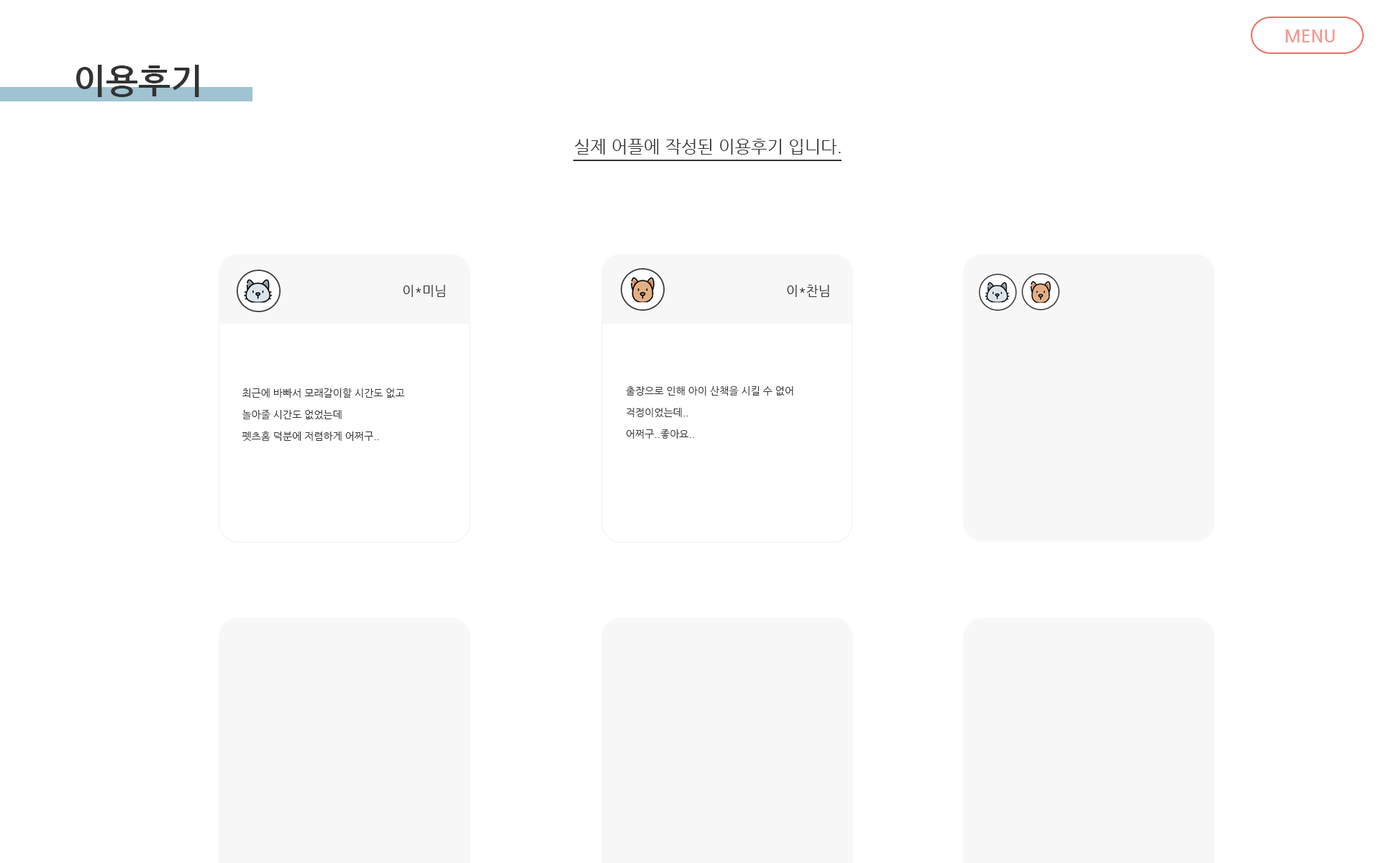
<style>
.page{position:relative;width:1381px;height:863px;background:#ffffff}
.page>*{position:absolute;margin:0}
.t1{font:17.3px "NanumGothicBold";color:#f59892}
.t2{font:34.5px "NanumGothicBold";color:#333333}
.t3{font:17.3px "NanumGothic";color:#333333}
.t4{font:12.9px "NanumGothic";color:#333333}
.t5{font:10.1px/21.6px "NanumGothic";color:#333333}
</style>
<div class="page">
<p class="t1" style="left:1286px;top:29px;width:49px;height:13px">MENU</p>
<p class="t2" style="left:76px;top:65px;width:123px;height:32px">이용후기</p>
<p class="t3" style="left:575px;top:139px;width:266px;height:16px">실제 어플에 작성된 이용후기 입니다.</p>
<p class="t4" style="left:403px;top:285px;width:42px;height:12px">이*미님</p>
<p class="t4" style="left:787px;top:285px;width:42px;height:12px">이*찬님</p>
<p class="t5" style="left:242px;top:388px;width:163px;height:54px">최근에 바빠서 모래갈이할 시간도 없고<br>놀아줄 시간도 없었는데<br>펫츠홈 덕분에 저렴하게 어쩌구..</p>
<p class="t5" style="left:626px;top:386px;width:168px;height:54px">출장으로 인해 아이 산책을 시킬 수 없어<br>걱정이었는데..<br>어쩌구..좋아요..</p>
</div>
